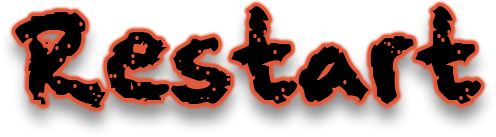
<style>
.page{position:relative;width:496px;height:137px;background:#ffffff}
.page>*{position:absolute;margin:0}
.t1{font:100px "squeakychalksound";color:#000000}
</style>
<div class="page">
<p class="t1" style="left:15px;top:6px;width:467px;height:102px">Restart</p>
</div>
